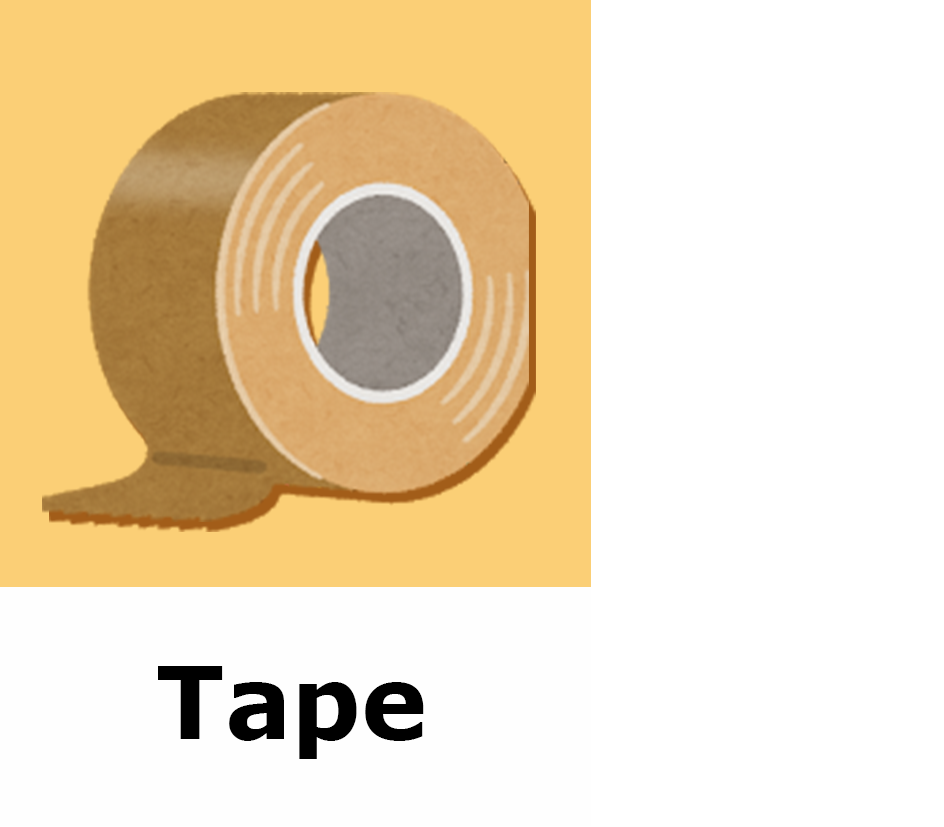
<style>
.page{position:relative;width:944px;height:827px;background:#ffffff}
.page>*{position:absolute;margin:0}
.t1{font:100px "Verdana-Bold";color:#000000}
</style>
<div class="page">
<p class="t1" style="left:158px;top:666px;width:266px;height:93px">Tape</p>
</div>
